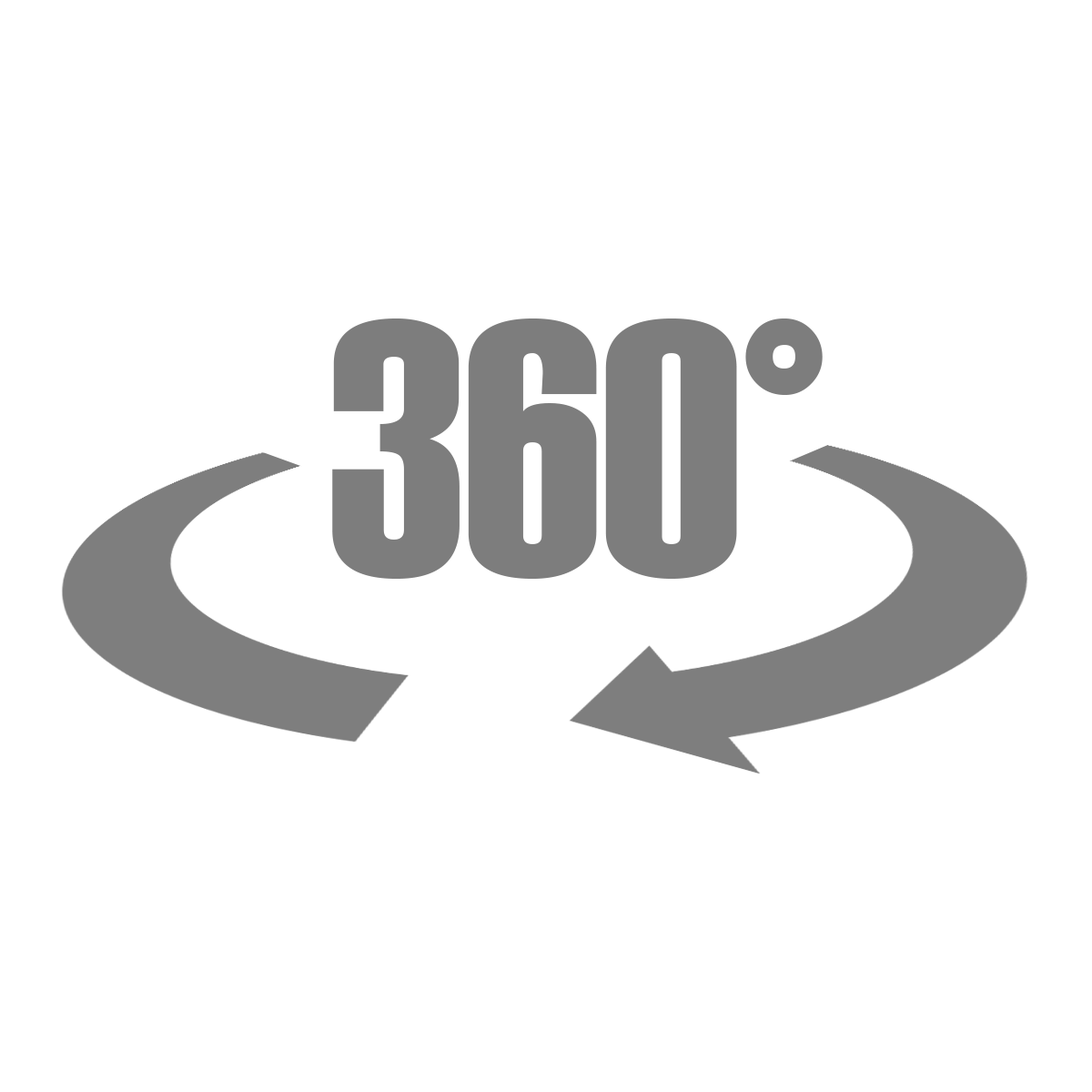
<style>
.page{position:relative;width:1092px;height:1092px;background:#ffffff}
.page>*{position:absolute;margin:0}
.t1{font:364px "Haettenschweiler";color:#7d7d7d}
</style>
<div class="page">
<p class="t1" style="left:332px;top:318px;width:491px;height:261px">360°</p>
</div>
